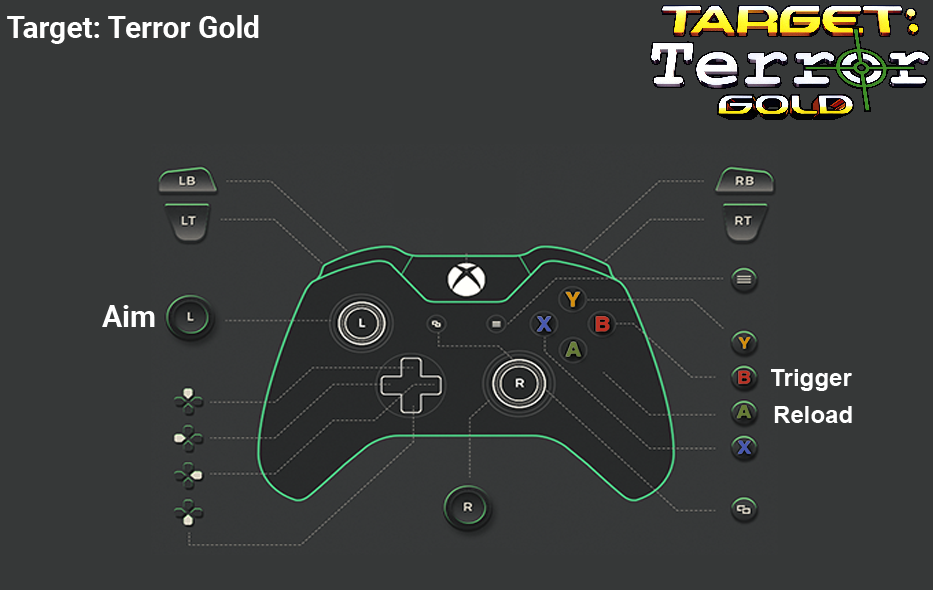
<style>
.page{position:relative;width:933px;height:590px;background:#363838}
.page>*{position:absolute;margin:0}
.t1{font:30px "Roboto-Bold";color:#ffffff}
.t2{font:30px "Roboto-Bold";color:#fefefe}
.t3{font:24px "Arial-BoldMT";color:#fefefe}
</style>
<div class="page">
<p class="t1" style="left:7px;top:15px;width:252px;height:29px">Target: Terror Gold</p>
<p class="t2" style="left:102px;top:305px;width:53px;height:22px">Aim</p>
<p class="t3" style="left:771px;top:369px;width:81px;height:22px">Trigger</p>
<p class="t3" style="left:774px;top:406px;width:78px;height:17px">Reload</p>
</div>
